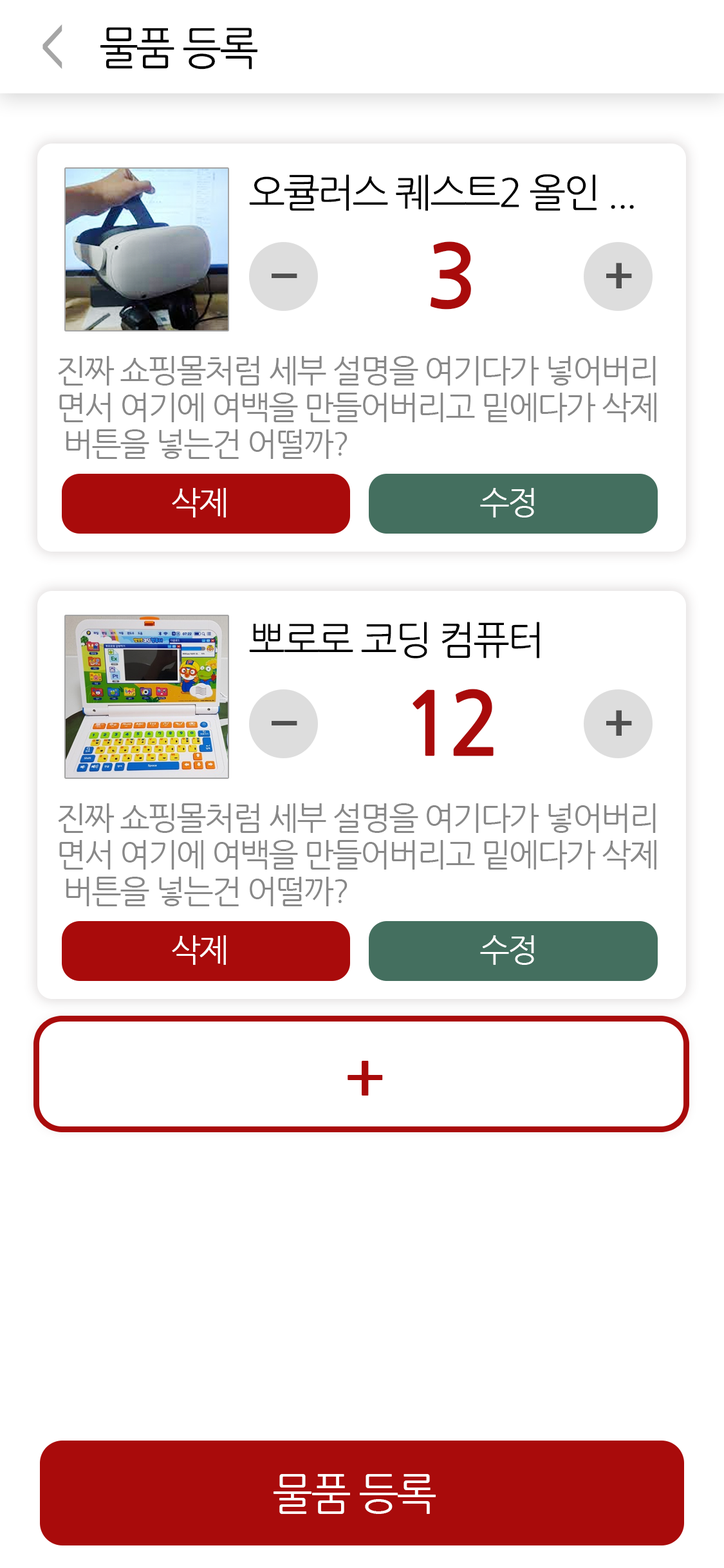
<style>
.page{position:relative;width:724px;height:1568px;background:#ffffff}
.page>*{position:absolute;margin:0}
.t1{font:45.2px "NanumGothicBold";letter-spacing:0.08em;color:#a6a6a6}
.t2{font:45.1px "NanumGothic";letter-spacing:-0.06em;color:#000000;scale:0.93 1}
.t3{font:39.2px "NanumGothic";letter-spacing:-0.06em;color:#000000}
.t4{font:86.8px "NanumGothicBold";letter-spacing:-0.06em;color:#a90b0b}
.t5{font:50.2px "H2hdrM";letter-spacing:-0.06em;color:#505050}
.t6{font:32.2px/36.7px "NanumGothic";letter-spacing:-0.06em;color:#888888}
.t7{font:32.2px "NanumGothic";letter-spacing:-0.06em;color:#ffffff}
.t8{font:63.1px "NanumGothicBold";color:#a90b0b}
.t9{font:43.4px "NanumGothic";letter-spacing:-0.06em;color:#ffffff}
</style>
<div class="page">
<p class="t1" style="left:42px;top:24px;width:20px;height:45px;rotate:180deg">&gt;</p>
<p class="t2" style="left:100px;top:27px;width:157px;height:43px">물품 등록</p>
<p class="t3" style="left:249px;top:174px;width:385px;height:37px">오큘러스 퀘스트2 올인 ...</p>
<p class="t4" style="left:430px;top:241px;width:41px;height:69px">3</p>
<p class="t5" style="left:606px;top:263px;width:26px;height:25px">+</p>
<p class="t5" style="left:272px;top:274px;width:25px;height:4px">-</p>
<p class="t6" style="left:58px;top:356px;width:599px;height:103px">진짜 쇼핑몰처럼 세부 설명을 여기다가 넣어버리<br>면서 여기에 여백을 만들어버리고 밑에다가 삭제<br> 버튼을 넣는건 어떨까?</p>
<p class="t7" style="left:172px;top:488px;width:54px;height:30px">삭제</p>
<p class="t7" style="left:480px;top:488px;width:54px;height:30px">수정</p>
<p class="t3" style="left:249px;top:622px;width:290px;height:36px">뽀로로 코딩 컴퓨터</p>
<p class="t4" style="left:413px;top:689px;width:81px;height:67px">12</p>
<p class="t5" style="left:606px;top:710px;width:26px;height:26px">+</p>
<p class="t5" style="left:272px;top:721px;width:25px;height:4px">-</p>
<p class="t6" style="left:58px;top:803px;width:599px;height:103px">진짜 쇼핑몰처럼 세부 설명을 여기다가 넣어버리<br>면서 여기에 여백을 만들어버리고 밑에다가 삭제<br> 버튼을 넣는건 어떨까?</p>
<p class="t7" style="left:172px;top:935px;width:54px;height:30px">삭제</p>
<p class="t7" style="left:480px;top:935px;width:54px;height:30px">수정</p>
<p class="t8" style="left:348px;top:1061px;width:35px;height:35px">+</p>
<p class="t9" style="left:274px;top:1474px;width:162px;height:40px">물품 등록</p>
</div>
